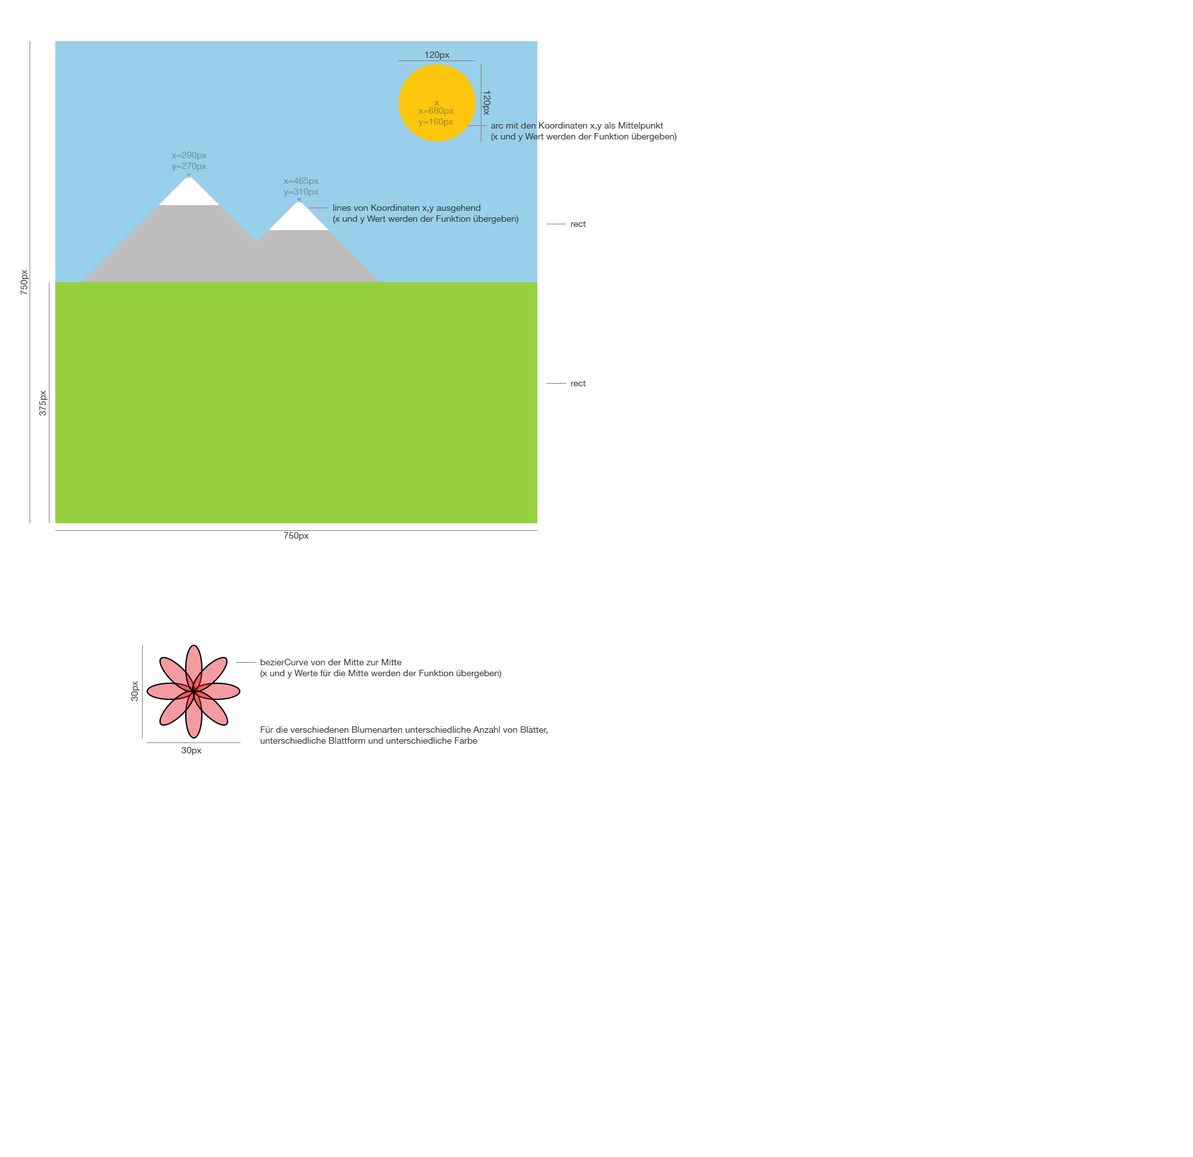
<style>
.page{position:relative;width:1193px;height:1157px;background:#ffffff}
.page>*{position:absolute;margin:0}
.t1{font:9px "HelveticaNeue";color:#424242}
.t2{font:9px "HelveticaNeue";color:#af8e2c}
.t3{font:9px "HelveticaNeue";color:#7293a4}
</style>
<div class="page">
<p class="t1" style="left:425px;top:51px;width:25px;height:9px">120px</p>
<p class="t1" style="left:482px;top:91px;width:9px;height:25px;rotate:90deg">120px</p>
<p class="t2" style="left:419px;top:107px;width:35px;height:20px">x=680px<br>y=160px</p>
<p class="t1" style="left:491px;top:122px;width:186px;height:19px">arc mit den Koordinaten x,y als Mittelpunkt<br>(x und y Wert werden der Funktion übergeben)</p>
<p class="t3" style="left:172px;top:152px;width:35px;height:19px">x=290px<br>y=270px</p>
<p class="t3" style="left:284px;top:177px;width:35px;height:20px">x=465px<br>y=310px</p>
<p class="t1" style="left:333px;top:204px;width:186px;height:20px">lines von Koordinaten x,y ausgehend<br>(x und y Wert werden der Funktion übergeben)</p>
<p class="t1" style="left:571px;top:221px;width:15px;height:6px">rect</p>
<p class="t1" style="left:20px;top:269px;width:9px;height:26px;rotate:-90deg">750px</p>
<p class="t1" style="left:571px;top:381px;width:15px;height:5px">rect</p>
<p class="t1" style="left:39px;top:390px;width:9px;height:26px;rotate:-90deg">375px</p>
<p class="t1" style="left:284px;top:532px;width:25px;height:9px">750px</p>
<p class="t1" style="left:260px;top:659px;width:241px;height:19px">bezierCurve von der Mitte zur Mitte <br>(x und y Werte für die Mitte werden der Funktion übergeben)</p>
<p class="t1" style="left:130px;top:681px;width:10px;height:20px;rotate:-90deg">30px</p>
<p class="t1" style="left:260px;top:726px;width:288px;height:18px">Für die verschiedenen Blumenarten unterschiedliche Anzahl von Blätter, <br>unterschiedliche Blattform und unterschiedliche Farbe</p>
<p class="t1" style="left:181px;top:747px;width:21px;height:8px">30px</p>
</div>
